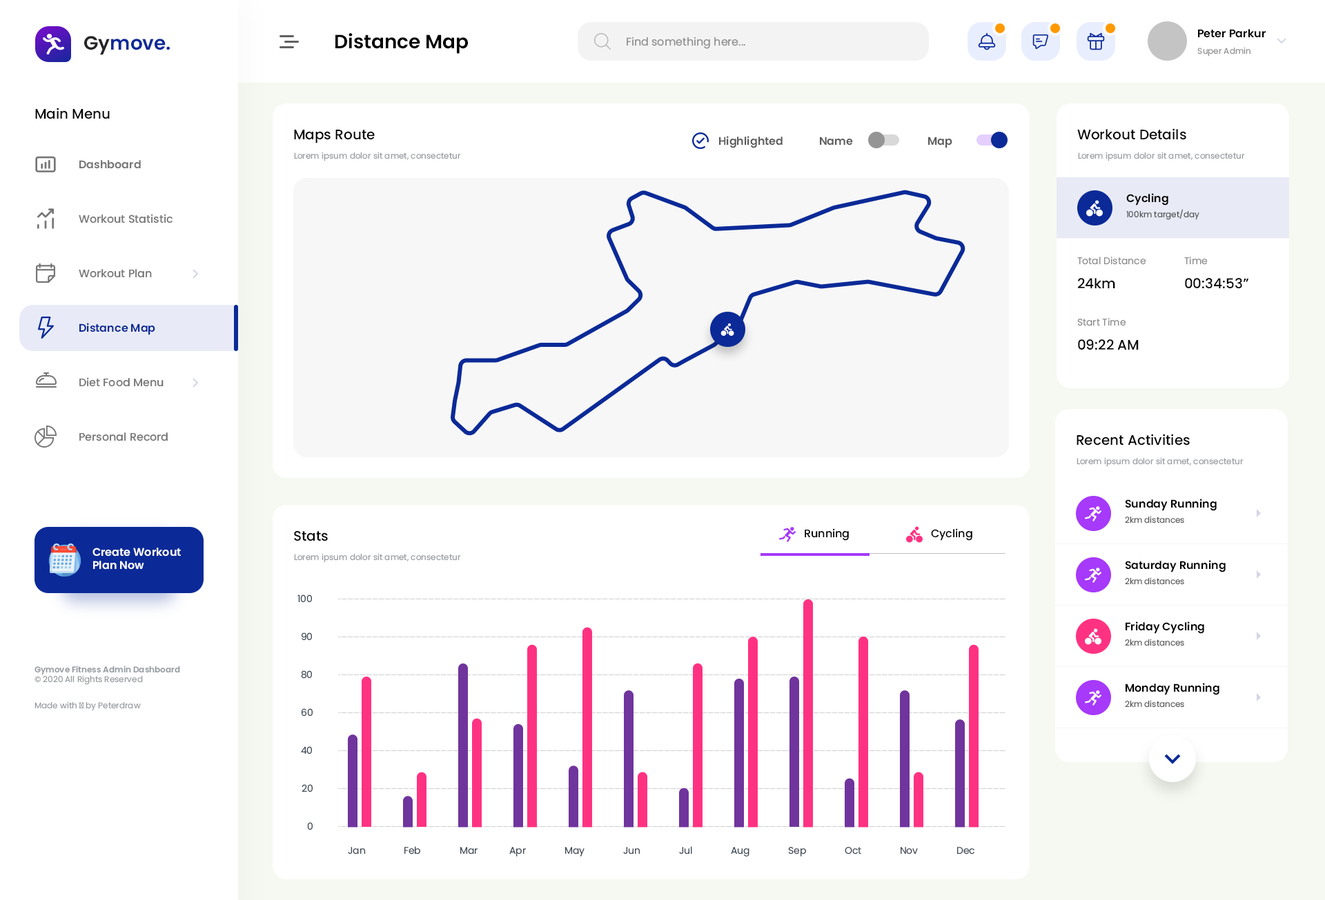
<style>
.page{position:relative;width:1325px;height:900px;background:#ffffff}
.page>*{position:absolute;margin:0}
.t1{font:11px "Poppins-SemiBold";color:#000000}
.t2{font:19.3px "Poppins-SemiBold";color:#0b2a97}
.t3{font:19.3px "Poppins-SemiBold";color:#262626}
.t4{font:19.3px "Poppins-SemiBold";color:#000000}
.t5{font:11px "Poppins-Regular";color:#8d8d8d}
.t6{font:8.3px "Poppins-Regular";color:#8f8f8f}
.t7{font:13.8px "Poppins-Medium";color:#000000}
.t8{font:11px "Poppins-SemiBold";color:#5c5c5c}
.t9{font:11px "Poppins-SemiBold";color:#757575}
.t10{font:8.3px "Poppins-Regular";color:#969ba0}
.t11{font:8.3px "Poppins-Regular";color:#4f5054}
.t12{font:11px "Poppins-Medium";color:#757575}
.t13{font:9.7px "Poppins-Regular";color:#8a8a8a}
.t14{font:11px "Poppins-SemiBold";color:#0b2a97}
.t15{font:8.3px "Poppins-Regular";color:#585858}
.t16{font:11px "Poppins-Medium";color:#000000}
.t17{font:11px "Poppins-SemiBold";color:#ffffff}
.t18{font:9.7px "Poppins-Regular";color:#3e4954}
.t19{font:8.3px "Poppins-SemiBold";color:#969ba0}
</style>
<div class="page">
<p class="t1" style="left:1198px;top:29px;width:67px;height:9px">Peter Parkur</p>
<p class="t2" style="left:84px;top:36px;width:86px;height:19px"><span class="t3">Gy</span>move.</p>
<p class="t4" style="left:335px;top:33px;width:133px;height:21px">Distance Map</p>
<p class="t5" style="left:626px;top:37px;width:119px;height:12px">Find something here...</p>
<p class="t6" style="left:1197px;top:47px;width:53px;height:10px">Super Admin</p>
<p class="t7" style="left:35px;top:108px;width:75px;height:11px">Main Menu</p>
<p class="t7" style="left:294px;top:130px;width:81px;height:13px">Maps Route</p>
<p class="t8" style="left:719px;top:136px;width:63px;height:12px">Highlighted</p>
<p class="t8" style="left:820px;top:137px;width:33px;height:9px">Name</p>
<p class="t8" style="left:928px;top:137px;width:24px;height:11px">Map</p>
<p class="t7" style="left:1077px;top:128px;width:109px;height:12px">Workout Details</p>
<p class="t9" style="left:79px;top:160px;width:62px;height:9px">Dashboard</p>
<p class="t10" style="left:294px;top:152px;width:167px;height:9px">Lorem ipsum dolor sit amet, consectetur</p>
<p class="t10" style="left:1078px;top:152px;width:167px;height:9px">Lorem ipsum dolor sit amet, consectetur</p>
<p class="t1" style="left:1126px;top:193px;width:42px;height:13px">Cycling</p>
<p class="t11" style="left:1126px;top:209px;width:73px;height:11px">100km target/day</p>
<p class="t12" style="left:79px;top:214px;width:93px;height:10px">Workout Statistic</p>
<p class="t13" style="left:1077px;top:257px;width:69px;height:8px">Total Distance</p>
<p class="t13" style="left:1184px;top:257px;width:23px;height:8px">Time</p>
<p class="t12" style="left:79px;top:269px;width:73px;height:9px">Workout Plan</p>
<p class="t7" style="left:1078px;top:278px;width:37px;height:10px">24km</p>
<p class="t7" style="left:1184px;top:278px;width:65px;height:11px">00:34:53”</p>
<p class="t14" style="left:79px;top:323px;width:76px;height:12px">Distance Map</p>
<p class="t13" style="left:1077px;top:318px;width:49px;height:8px">Start Time</p>
<p class="t7" style="left:1078px;top:339px;width:60px;height:11px">09:22 AM</p>
<p class="t12" style="left:79px;top:377px;width:84px;height:10px">Diet Food Menu</p>
<p class="t12" style="left:79px;top:433px;width:89px;height:9px">Personal Record</p>
<p class="t7" style="left:1076px;top:434px;width:113px;height:12px">Recent Activities</p>
<p class="t10" style="left:1076px;top:457px;width:167px;height:10px">Lorem ipsum dolor sit amet, consectetur</p>
<p class="t1" style="left:1124px;top:499px;width:92px;height:12px">Sunday Running</p>
<p class="t15" style="left:1124px;top:516px;width:60px;height:8px">2km distances</p>
<p class="t7" style="left:294px;top:531px;width:34px;height:11px">Stats</p>
<p class="t16" style="left:804px;top:528px;width:45px;height:13px">Running</p>
<p class="t16" style="left:931px;top:528px;width:41px;height:13px">Cycling</p>
<p class="t17" style="left:92px;top:548px;width:89px;height:22px">Create Workout Plan Now</p>
<p class="t10" style="left:294px;top:553px;width:167px;height:10px">Lorem ipsum dolor sit amet, consectetur</p>
<p class="t1" style="left:1124px;top:560px;width:101px;height:13px">Saturday Running</p>
<p class="t15" style="left:1124px;top:577px;width:60px;height:8px">2km distances</p>
<p class="t18" style="left:297px;top:595px;width:15px;height:8px">100</p>
<p class="t1" style="left:1125px;top:622px;width:79px;height:12px">Friday Cycling</p>
<p class="t18" style="left:301px;top:633px;width:11px;height:8px">90</p>
<p class="t15" style="left:1124px;top:639px;width:60px;height:7px">2km distances</p>
<p class="t19" style="left:34px;top:666px;width:146px;height:19px">Gymove Fitness Admin Dashboard<br><span class="t10">© 2020 All Rights Reserved</span></p>
<p class="t18" style="left:301px;top:671px;width:11px;height:8px">80</p>
<p class="t1" style="left:1125px;top:683px;width:94px;height:12px">Monday Running</p>
<p class="t10" style="left:34px;top:702px;width:107px;height:9px">Made with ♥ by Peterdraw</p>
<p class="t15" style="left:1124px;top:700px;width:60px;height:8px">2km distances</p>
<p class="t18" style="left:301px;top:708px;width:12px;height:9px">60</p>
<p class="t18" style="left:301px;top:746px;width:11px;height:9px">40</p>
<p class="t18" style="left:301px;top:784px;width:12px;height:9px">20</p>
<p class="t18" style="left:307px;top:822px;width:6px;height:9px">0</p>
<p class="t18" style="left:348px;top:847px;width:18px;height:8px">Jan</p>
<p class="t18" style="left:404px;top:846px;width:16px;height:9px">Feb</p>
<p class="t18" style="left:460px;top:847px;width:17px;height:8px">Mar</p>
<p class="t18" style="left:509px;top:847px;width:17px;height:10px">Apr</p>
<p class="t18" style="left:565px;top:847px;width:19px;height:10px">May</p>
<p class="t18" style="left:623px;top:847px;width:17px;height:8px">Jun</p>
<p class="t18" style="left:679px;top:846px;width:13px;height:9px">Jul</p>
<p class="t18" style="left:731px;top:847px;width:18px;height:10px">Aug</p>
<p class="t18" style="left:788px;top:847px;width:18px;height:10px">Sep</p>
<p class="t18" style="left:844px;top:847px;width:17px;height:8px">Oct</p>
<p class="t18" style="left:900px;top:847px;width:18px;height:8px">Nov</p>
<p class="t18" style="left:957px;top:847px;width:17px;height:8px">Dec</p>
</div>
